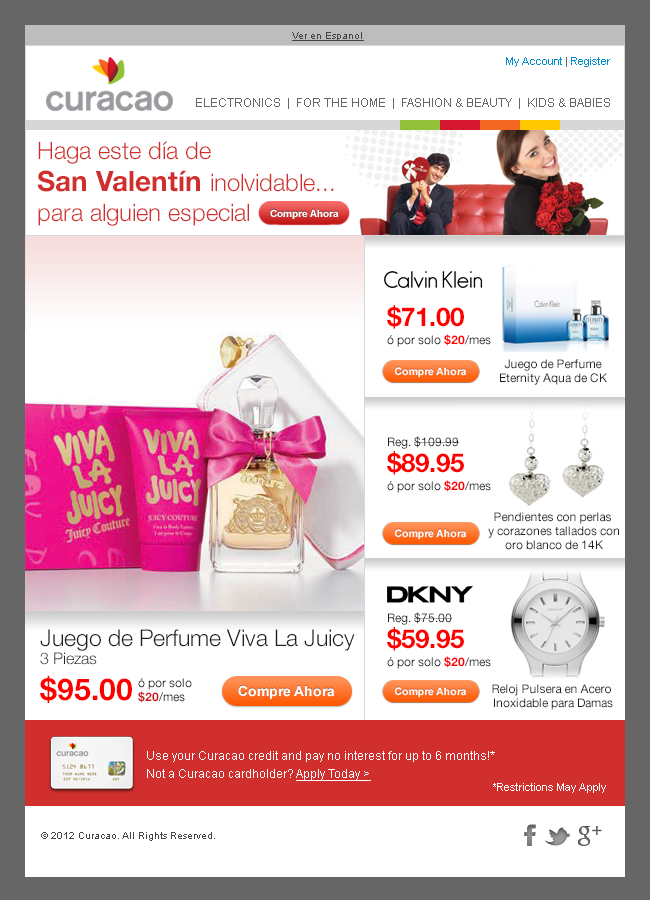
<style>
.page{position:relative;width:650px;height:900px;background:#ffffff}
.page>*{position:absolute;margin:0}
.t1{font:10px "ArialMT";color:#444444;text-decoration:underline}
.t2{font:11px "ArialMT";color:#008ecf}
.t3{font:11px "ArialMT";color:#666666}
.t4{font:12px "ArialMT";color:#666666}
.t5{font:24px/30px "HelveticaNeue-Light";color:#d02f2e}
.t6{font:24px/24px "HelveticaNeue-Light";color:#d02f2e}
.t7{font:28px/32px "HelveticaNeue-Bold";color:#d02f2e}
.t8{font:24px/32px "HelveticaNeue-Light";color:#d02f2e}
.t9{font:10px "Arial-BoldMT";color:#ffffff}
.t10{font:12px/14px "HelveticaNeue-Roman";color:#1e1e1e}
.t11{font:12px/18px "HelveticaNeue-Roman";color:#1e1e1e}
.t12{font:26px/26px "HelveticaNeue-Bold";color:#ff0000}
.t13{font:12px/18px "HelveticaNeue-Bold";color:#ff0000}
.t14{font:23px/18px "HelveticaNeue-Light";color:#1e1e1e}
.t15{font:16px/18px "HelveticaNeue-Light";color:#1e1e1e}
.t16{font:30px/36px "HelveticaNeue-Bold";color:#ff0000}
.t17{font:12px/14px "HelveticaNeue-Roman";color:#ce181e}
.t18{font:12px/14px "HelveticaNeue-Bold";color:#ce181e}
.t19{font:12px/18px "ArialMT";color:#ffffff}
.t20{font:12px/18px "ArialMT";color:#ffffff;text-decoration:underline}
.t21{font:11px "ArialMT";color:#ffffff}
.t22{font:10px "ArialMT";color:#444444}
</style>
<div class="page">
<p class="t1" style="left:292px;top:32px;width:72px;height:9px">Ver en Espanol</p>
<p class="t2" style="left:506px;top:57px;width:104px;height:10px">My Account<span class="t3"> | </span>Register</p>
<p class="t4" style="left:196px;top:98px;width:414px;height:11px">ELECTRONICS  |  FOR THE HOME  |  FASHION &amp; BEAUTY  |  KIDS &amp; BABIES</p>
<p class="t5" style="left:37px;top:141px;width:297px;height:85px"><span class="t6">Haga este día de <br></span><span class="t7">San Valentín </span><span class="t8">inolvidable...<br></span>para alguien especial</p>
<p class="t9" style="left:270px;top:209px;width:69px;height:10px">Compre Ahora</p>
<p class="t10" style="left:387px;top:305px;width:104px;height:42px"><span class="t11"><br></span><span class="t12">$71.00<br></span>ó por solo <span class="t13">$20</span><span class="t11">/mes</span></p>
<p class="t10" style="left:500px;top:359px;width:107px;height:26px;text-align:center">Juego de Perfume<br>Eternity Aqua de CK</p>
<p class="t11" style="left:387px;top:436px;width:104px;height:57px">Reg. $109.99<br><span class="t12">$89.95<br></span><span class="t10">ó por solo </span><span class="t13">$20</span>/mes</p>
<p class="t10" style="left:488px;top:512px;width:131px;height:38px;text-align:center">Pendientes con perlas <br>y corazones tallados con<br>oro blanco de 14K</p>
<p class="t11" style="left:387px;top:612px;width:104px;height:57px">Reg. $75.00<br><span class="t12">$59.95<br></span><span class="t10">ó por solo </span><span class="t13">$20</span>/mes</p>
<p class="t14" style="left:40px;top:629px;width:315px;height:74px">Juego de Perfume Viva La Juicy<br><span class="t15">3 Piezas<br></span><span class="t16">$95.00</span></p>
<p class="t17" style="left:138px;top:678px;width:54px;height:25px">ó por solo<br><span class="t18">$20</span>/mes</p>
<p class="t10" style="left:492px;top:684px;width:121px;height:26px;text-align:center">Reloj Pulsera en Acero <br>Inoxidable para Damas</p>
<p class="t19" style="left:147px;top:751px;width:348px;height:30px">Use your Curacao credit and pay no interest for up to 6 months!*<br>Not a Curacao cardholder? <span class="t20">Apply Today &gt;</span></p>
<p class="t21" style="left:493px;top:783px;width:113px;height:10px">*Restrictions May Apply</p>
<p class="t22" style="left:41px;top:832px;width:174px;height:9px">© 2012 Curacao. All Rights Reserved.</p>
</div>
